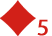
<style>
.page{position:relative;width:52px;height:36px;background:#ffffff}
.page>*{position:absolute;margin:0}
.t1{font:23.4px "MyriadPro-Regular";letter-spacing:-0.1em;color:#d22018;font-weight:bold}
</style>
<div class="page">
<p class="t1" style="left:37px;top:19px;width:11px;height:17px">5</p>
</div>
